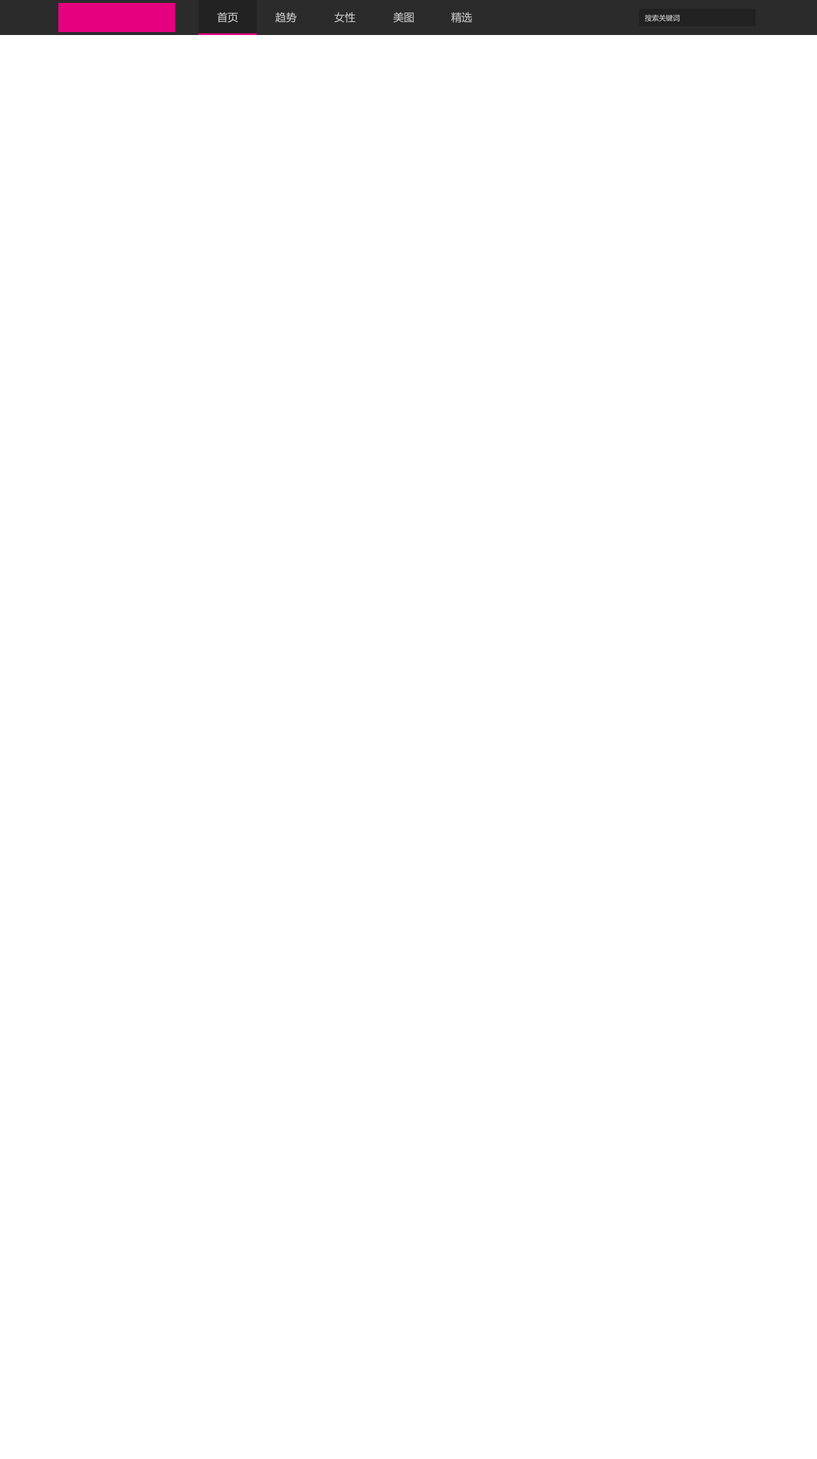
<style>
.page{position:relative;width:817px;height:1459px;background:#ffffff}
.page>*{position:absolute;margin:0}
.t1{font:10.5px "MicrosoftYaHei";color:#cccccc}
.t2{font:7px "MicrosoftYaHei";color:#cccccc}
</style>
<div class="page">
<p class="t1" style="left:217px;top:12px;width:21px;height:11px">首页</p>
<p class="t1" style="left:276px;top:12px;width:21px;height:11px">趋势</p>
<p class="t1" style="left:334px;top:12px;width:21px;height:11px">女性</p>
<p class="t1" style="left:393px;top:12px;width:21px;height:11px">美图</p>
<p class="t1" style="left:451px;top:12px;width:21px;height:11px">精选</p>
<p class="t2" style="left:645px;top:15px;width:35px;height:7px">搜索关键词</p>
</div>
